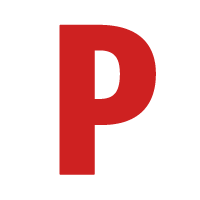
<style>
.page{position:relative;width:200px;height:200px;background:#ffffff}
.page>*{position:absolute;margin:0}
.t1{font:200px "GlowSansSC-Compressed-ExtraBold";color:#ce2121;font-weight:bold}
</style>
<div class="page">
<p class="t1" style="left:59px;top:24px;width:97px;height:151px">P</p>
</div>
